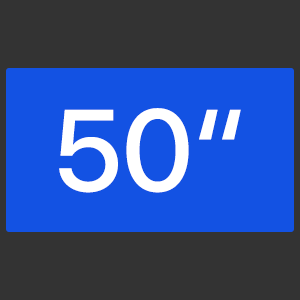
<style>
.page{position:relative;width:300px;height:300px;background:#333333}
.page>*{position:absolute;margin:0}
.t1{font:115px "SFUIDisplay-Medium";color:#ffffff}
</style>
<div class="page">
<p class="t1" style="left:59px;top:108px;width:182px;height:85px">50“</p>
</div>
